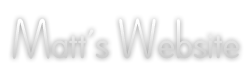
<style>
.page{position:relative;width:250px;height:80px;background:#ffffff}
.page>*{position:absolute;margin:0}
.t1{font:40px "Dreamspeak";color:#dedede}
</style>
<div class="page">
<p class="t1" style="left:12px;top:18px;width:227px;height:41px">Matt’s Website</p>
</div>
